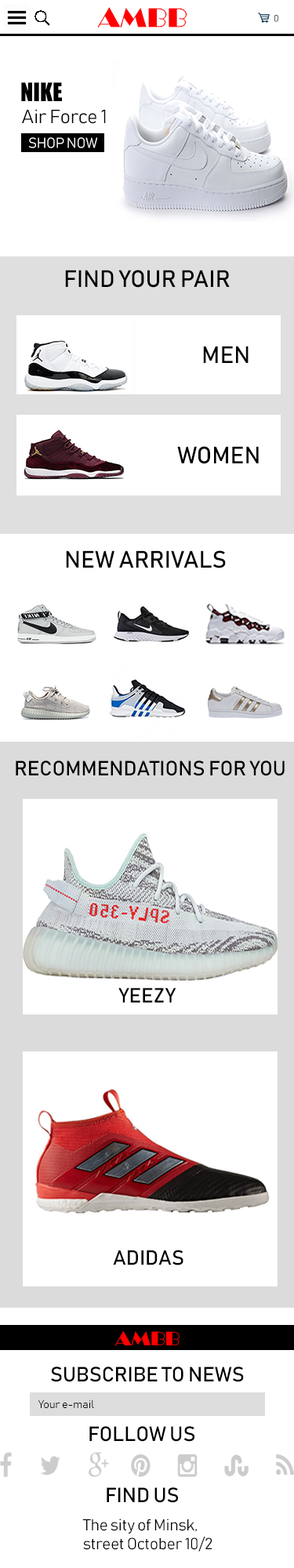
<style>
.page{position:relative;width:294px;height:1568px;background:#ffffff}
.page>*{position:absolute;margin:0}
.t1{font:28.2px "Broadway";color:#ff0000}
.t2{font:9.4px "Bahnschrift"}
.t3{font:23.5px "Impact";color:#000000}
.t4{font:18.8px "Bahnschrift";color:#000000}
.t5{font:14.1px "Bahnschrift";color:#ffffff}
.t6{font:23.5px "Bahnschrift";color:#000000}
.t7{font:23.5px "Bahnschrift";color:#070707}
.t8{font:20.4px "Bahnschrift";color:#000000}
.t9{font:20.4px "Broadway";color:#ff0000}
.t10{font:11px "Bahnschrift";color:#000000}
.t11{font:15.7px "Bahnschrift";color:#000000}
</style>
<div class="page">
<p class="t1" style="left:97px;top:7px;width:90px;height:20px">AMBB</p>
<p class="t2" style="left:274px;top:15px;width:4px;height:7px">0</p>
<p class="t3" style="left:21px;top:82px;width:41px;height:19px">NIKE</p>
<p class="t4" style="left:22px;top:109px;width:84px;height:15px">Air Force 1</p>
<p class="t5" style="left:28px;top:137px;width:70px;height:11px">SHOP NOW</p>
<p class="t6" style="left:65px;top:270px;width:165px;height:18px">FIND YOUR PAIR</p>
<p class="t7" style="left:203px;top:346px;width:46px;height:17px">MEN</p>
<p class="t6" style="left:177px;top:446px;width:82px;height:18px">WOMEN</p>
<p class="t6" style="left:66px;top:550px;width:160px;height:18px">NEW ARRIVALS</p>
<p class="t8" style="left:16px;top:760px;width:269px;height:16px">RECOMMENDATIONS FOR YOU</p>
<p class="t8" style="left:118px;top:988px;width:58px;height:15px">YEEZY</p>
<p class="t8" style="left:113px;top:1250px;width:70px;height:15px">ADIDAS</p>
<p class="t9" style="left:114px;top:1330px;width:66px;height:16px">AMBB</p>
<p class="t8" style="left:51px;top:1367px;width:193px;height:15px">SUBSCRIBE TO NEWS</p>
<p class="t10" style="left:38px;top:1400px;width:56px;height:8px">Your e-mail</p>
<p class="t8" style="left:89px;top:1426px;width:105px;height:16px">FOLLOW US</p>
<p class="t8" style="left:107px;top:1487px;width:71px;height:16px">FIND US</p>
<p class="t11" style="left:82px;top:1519px;width:130px;height:33px">The sity of Minsk,<br>street October 10/2</p>
</div>
